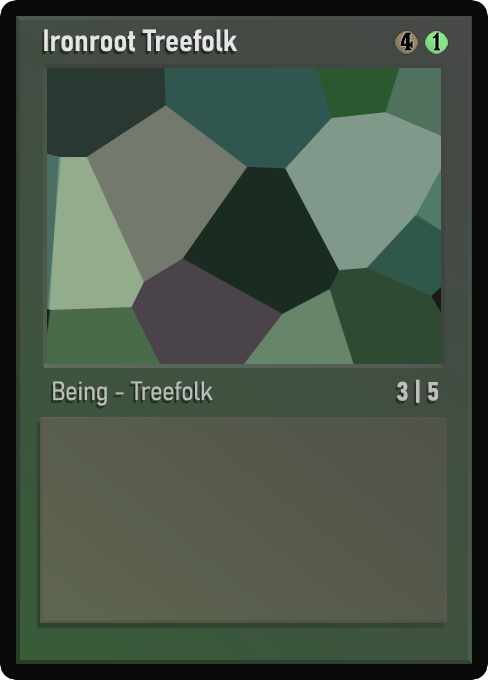
<style>
.page{position:relative;width:488px;height:680px}
.page>*{position:absolute;margin:0}
.t1{font:30px "Bahnschrift-SemiBoldSemiCondensed";color:#f2f2f2;font-weight:bold}
.t2{font:25px "WTRRoycroft";color:#000000;font-weight:bold;scale:1.09 1}
.t3{font:26px "Bahnschrift-LightSemiCondensed";color:#c8c8c8;font-weight:bold}
.t4{font:26px "Bahnschrift-BoldSemiCondensed";color:#bdbfbd;font-weight:bold}
</style>
<div class="page">
<p class="t1" style="left:44px;top:29px;width:193px;height:23px;opacity:0.9">Ironroot Treefolk</p>
<p class="t2" style="left:400px;top:32px;width:13px;height:19px">4</p>
<p class="t2" style="left:432px;top:32px;width:9px;height:19px">1</p>
<p class="t3" style="left:53px;top:381px;width:160px;height:25px;opacity:0.9">Being - Treefolk</p>
<p class="t4" style="left:397px;top:379px;width:41px;height:24px">3 | 5</p>
</div>
